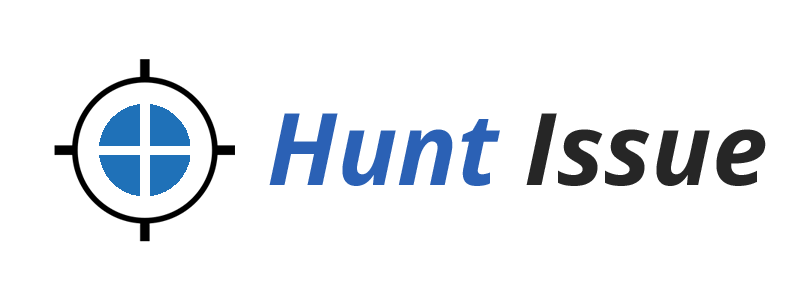
<style>
.page{position:relative;width:800px;height:300px;background:#ffffff}
.page>*{position:absolute;margin:0}
.t1{font:100px "OpenSans-BoldItalic";color:#262626}
.t2{font:100px "OpenSans-BoldItalic";color:#2b61b5}
</style>
<div class="page">
<p class="t1" style="left:269px;top:113px;width:497px;height:73px"><span class="t2">Hunt </span>Issue</p>
</div>
